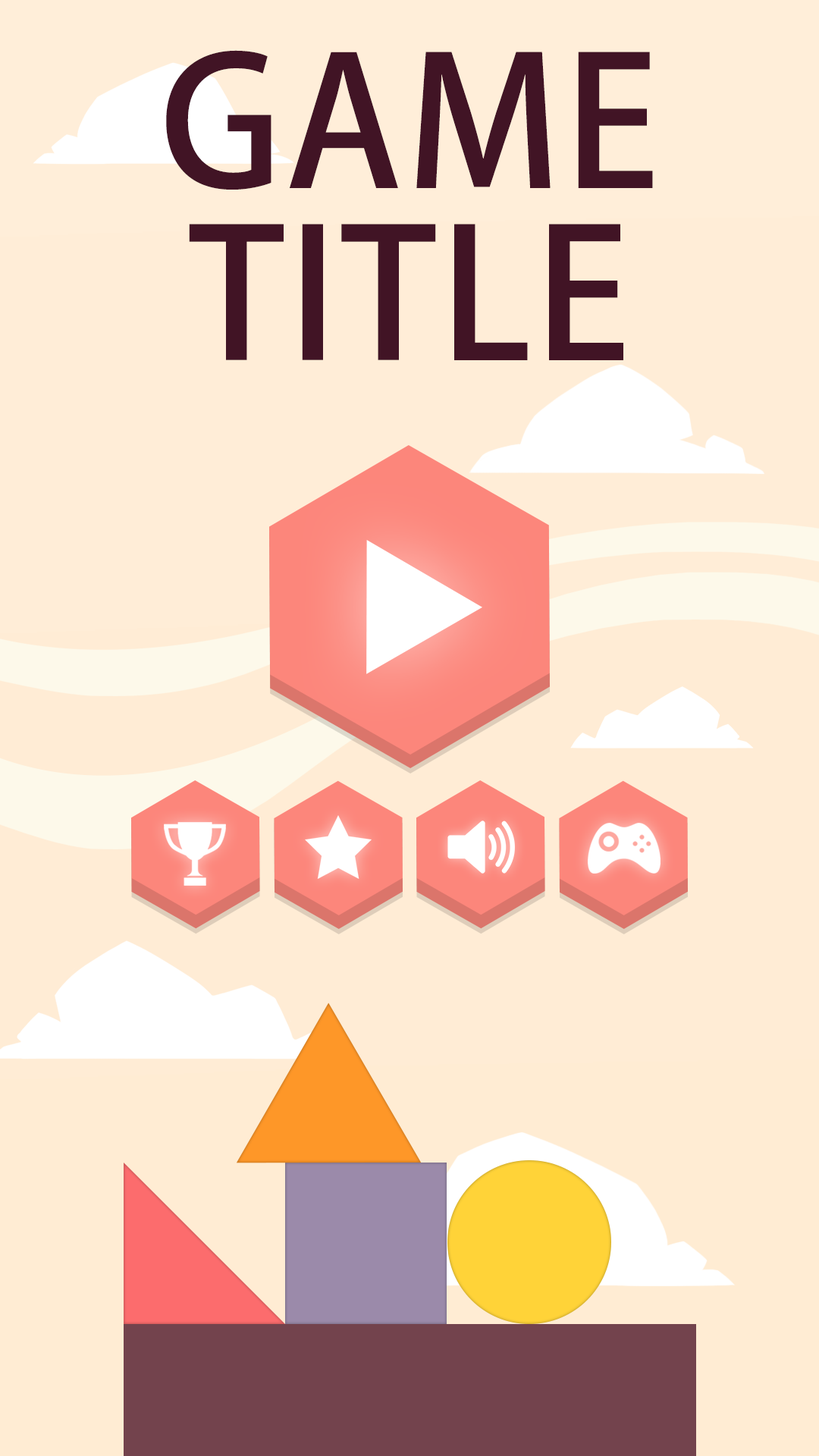
<style>
.page{position:relative;width:819px;height:1456px}
.page>*{position:absolute;margin:0}
.t1{font:177.5px/172px "AdobeFanHeitiStd-Bold";letter-spacing:0.02em;color:#411425}
</style>
<div class="page">
<p class="t1" style="left:166px;top:50px;width:487px;height:310px;text-align:center">GAME<br>TITLE</p>
</div>
